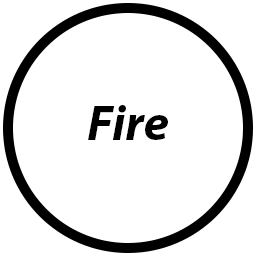
<style>
.page{position:relative;width:256px;height:256px;background:#ffffff}
.page>*{position:absolute;margin:0}
.t1{font:50px "MyriadPro-BoldIt";color:#000000}
</style>
<div class="page">
<p class="t1" style="left:88px;top:105px;width:80px;height:35px">Fire</p>
</div>
